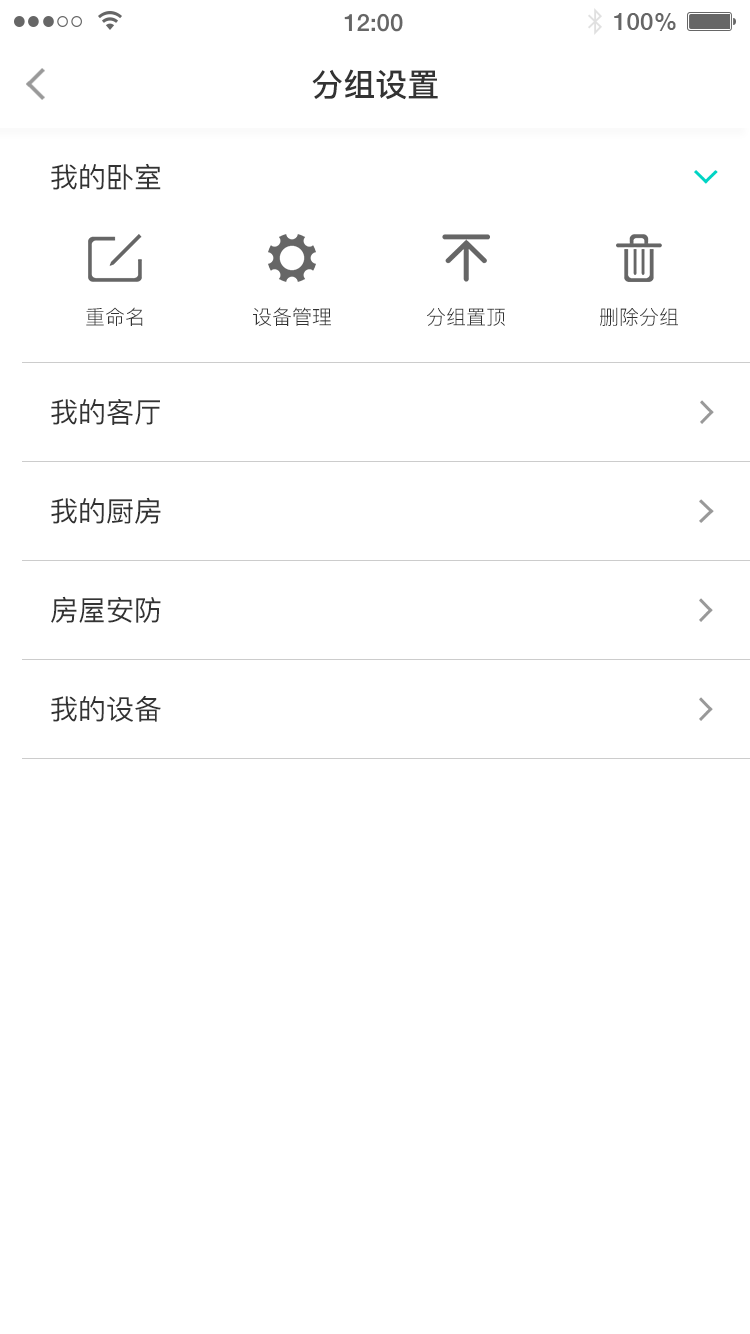
<style>
.page{position:relative;width:750px;height:1334px;background:#ffffff}
.page>*{position:absolute;margin:0}
.t1{font:32px "PingFang-SC-Bold";color:#333333}
.t2{font:28px "PingFang-SC-Medium";color:#333333}
.t3{font:20px "PingFang-SC-Regular";color:#333333}
</style>
<div class="page">
<p class="t1" style="left:312px;top:69px;width:126px;height:31px">分组设置</p>
<p class="t2" style="left:51px;top:163px;width:110px;height:27px">我的卧室</p>
<p class="t3" style="left:86px;top:307px;width:57px;height:19px">重命名</p>
<p class="t3" style="left:253px;top:307px;width:78px;height:19px">设备管理</p>
<p class="t3" style="left:427px;top:307px;width:78px;height:19px">分组置顶</p>
<p class="t3" style="left:600px;top:307px;width:78px;height:19px">删除分组</p>
<p class="t2" style="left:51px;top:399px;width:109px;height:26px">我的客厅</p>
<p class="t2" style="left:51px;top:497px;width:110px;height:27px">我的厨房</p>
<p class="t2" style="left:51px;top:596px;width:110px;height:27px">房屋安防</p>
<p class="t2" style="left:51px;top:695px;width:110px;height:27px">我的设备</p>
</div>
